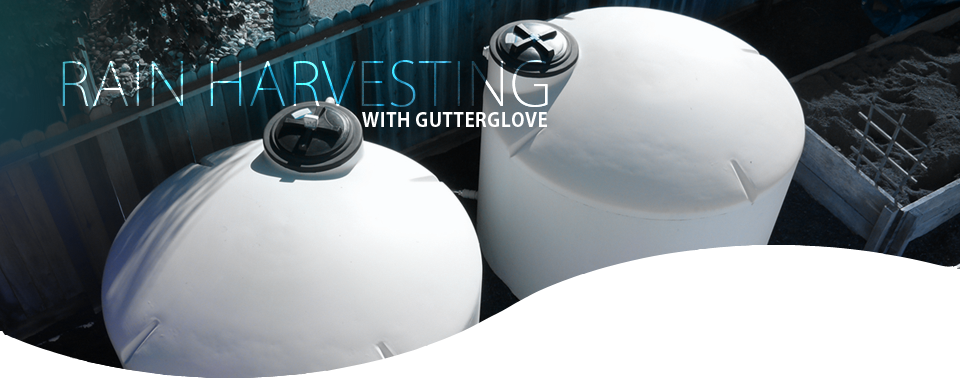
<style>
.page{position:relative;width:960px;height:382px}
.page>*{position:absolute;margin:0}
.t1{font:60px "KozGoPro-ExtraLight";letter-spacing:0.022em;text-transform:uppercase}
.t2{font:19px "AdobeGothicStd-Bold";letter-spacing:0.022em;color:#ffffff;text-transform:uppercase}
</style>
<div class="page">
<p class="t1" style="left:62px;top:60px;width:486px;height:47px">Rain Harvesting</p>
<p class="t1" style="left:62px;top:60px;width:486px;height:47px">Rain Harvesting</p>
<p class="t2" style="left:362px;top:112px;width:185px;height:15px">with gutterglove</p>
</div>
